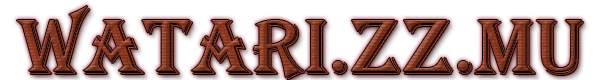
<style>
.page{position:relative;width:600px;height:80px;background:#ffffff}
.page>*{position:absolute;margin:0}
.t1{font:81px "Algerian"}
</style>
<div class="page">
<p class="t1" style="left:16px;top:6px;width:568px;height:74px">WATARI.ZZ.MU</p>
</div>
